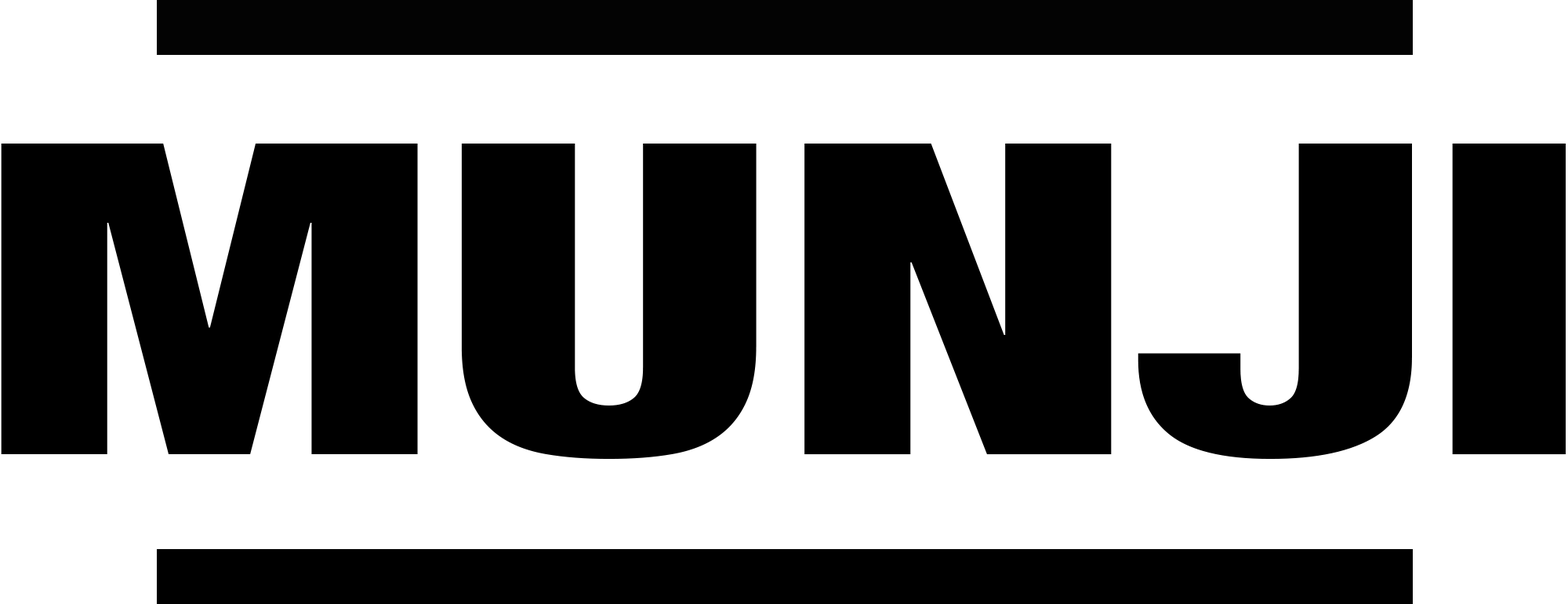
<style>
.page{position:relative;width:1568px;height:604px;background:#ffffff}
.page>*{position:absolute;margin:0}
.t1{font:434.5px "HelveticaNeue-CondensedBlack";color:#000000;scale:1.4 1}
</style>
<div class="page">
<p class="t1" style="left:1px;top:143px;width:1565px;height:316px">MUNJI</p>
</div>
